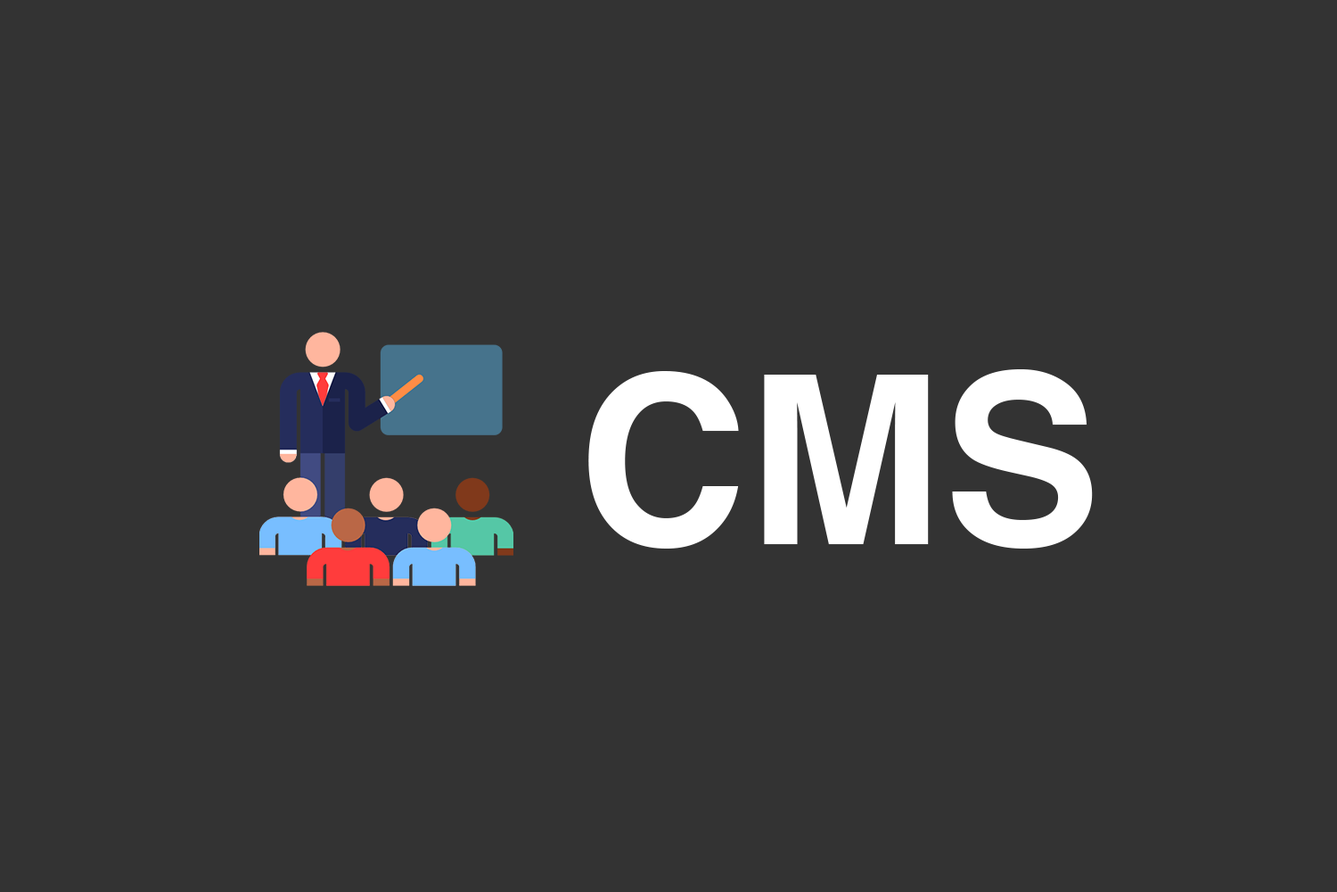
<style>
.page{position:relative;width:1337px;height:892px;background:#333333}
.page>*{position:absolute;margin:0}
.t1{font:235.4px "Helvetica-Bold";color:#ffffff}
</style>
<div class="page">
<p class="t1" style="left:588px;top:369px;width:505px;height:179px">CMS</p>
</div>
